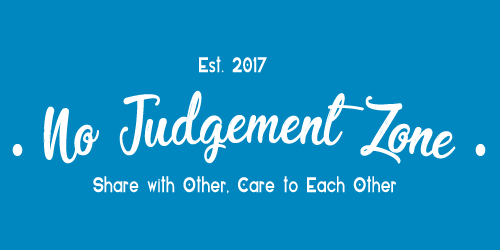
<style>
.page{position:relative;width:500px;height:250px;background:#0087bf}
.page>*{position:absolute;margin:0}
.t1{font:20.1px "Elianto-Regular";color:#ffffff;scale:0.79 1}
.t2{font:60.7px "Enchanting-Celebrations";color:#ffffff;scale:0.77 1}
.t3{font:136.5px "Elianto-Regular";color:#ffffff;scale:0.79 1}
</style>
<div class="page">
<p class="t1" style="left:199px;top:56px;width:68px;height:17px">Est. 2017</p>
<p class="t2" style="left:43px;top:90px;width:413px;height:74px">No Judgement Zone</p>
<p class="t3" style="left:12px;top:144px;width:11px;height:12px">.</p>
<p class="t3" style="left:475px;top:144px;width:11px;height:12px">.</p>
<p class="t1" style="left:93px;top:176px;width:303px;height:18px">Share with Other, Care to Each Other</p>
</div>
